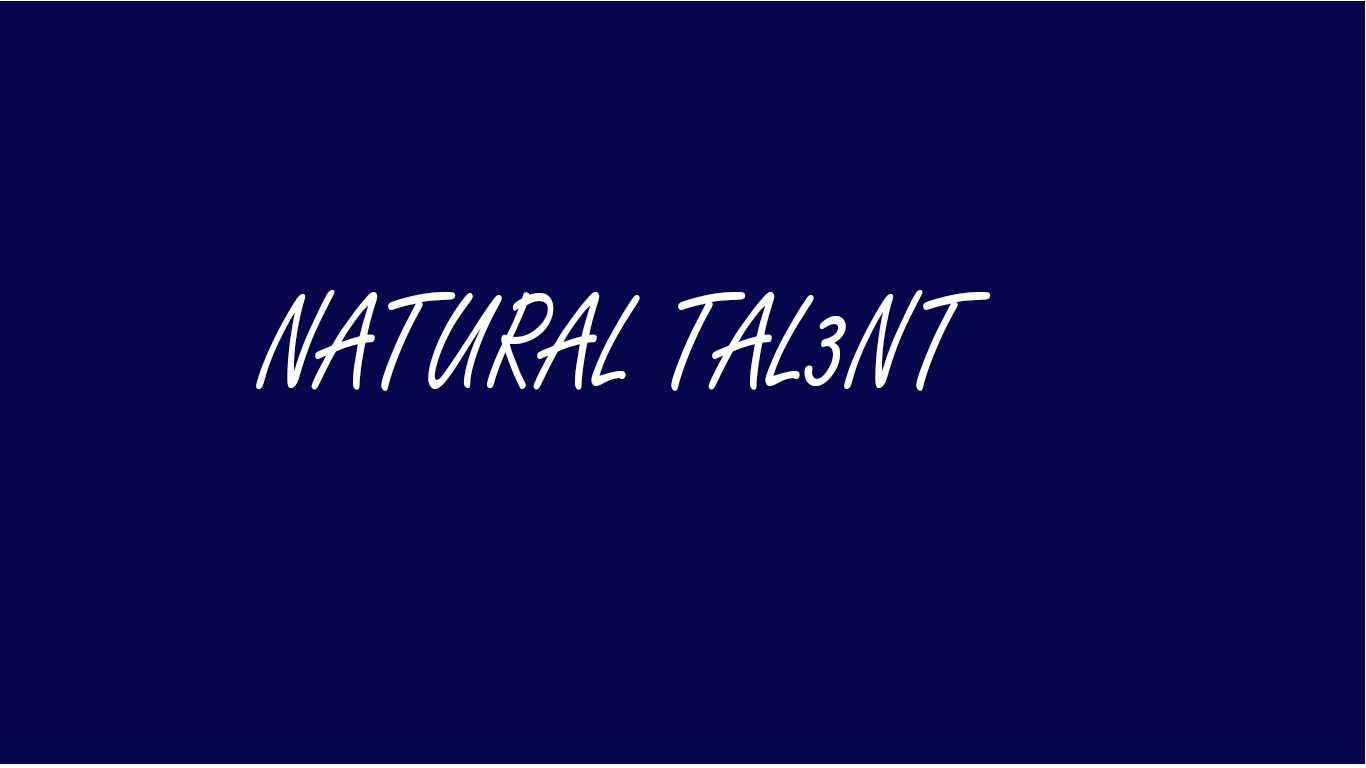
<style>
.page{position:relative;width:1366px;height:768px;background:#07064d}
.page>*{position:absolute;margin:0}
.t1{font:142.7px "FreestyleScript-Regular";color:#fefeff;scale:0.84 1}
</style>
<div class="page">
<p class="t1" style="left:256px;top:290px;width:735px;height:101px">NATURAL TAL3NT</p>
</div>
